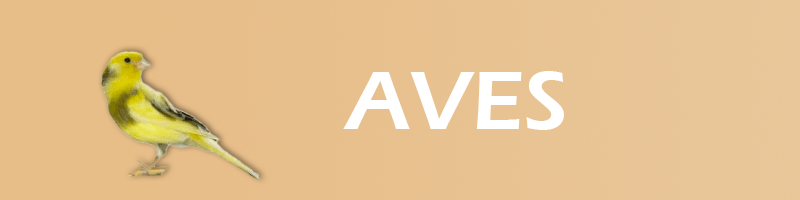
<style>
.page{position:relative;width:800px;height:200px}
.page>*{position:absolute;margin:0}
.t1{font:86.2px "ErasITC-Demi";color:#ffffff}
</style>
<div class="page">
<p class="t1" style="left:343px;top:71px;width:221px;height:59px">AVES</p>
</div>
